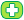
<style>
.page{position:relative;width:24px;height:20px;background:#ffffff}
.page>*{position:absolute;margin:0}
.t1{font:36px "Romeral";color:#ffffff}
</style>
<div class="page">
<p class="t1" style="left:6px;top:4px;width:12px;height:12px">+</p>
</div>
